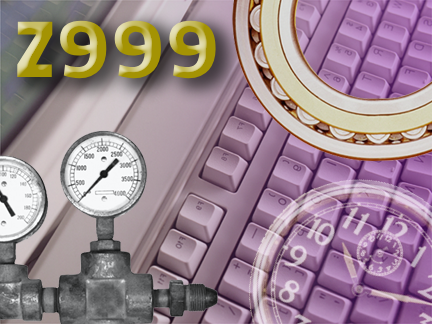
<style>
.page{position:relative;width:432px;height:324px}
.page>*{position:absolute;margin:0}
.t1{font:80px "Candal"}
</style>
<div class="page">
<p class="t1" style="left:17px;top:20px;width:199px;height:59px">Z999</p>
</div>
